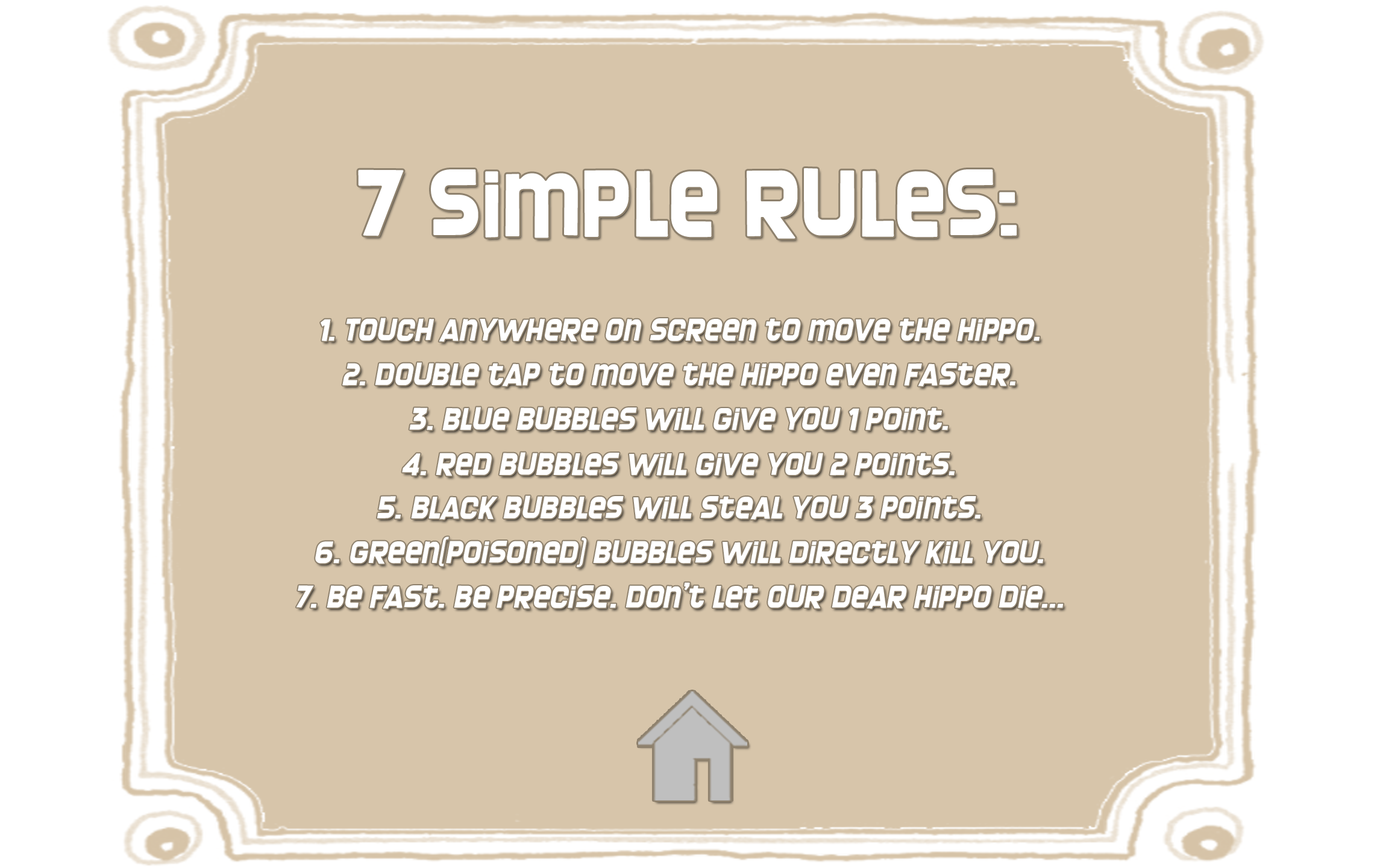
<style>
.page{position:relative;width:1374px;height:868px;background:#d7c5aa}
.page>*{position:absolute;margin:0}
.t1{font:97.6px "Screengem-Regular";color:#ffffff;scale:1.06 1}
.t2{font:32.5px "Screengem-Regular";color:#ffffff;font-style:italic;scale:1.06 1}
</style>
<div class="page">
<p class="t1" style="left:358px;top:168px;width:659px;height:71px">7 simple rules:</p>
<p class="t2" style="left:321px;top:318px;width:719px;height:24px">1. Touch anywhere on screen to move the Hippo.</p>
<p class="t2" style="left:342px;top:362px;width:674px;height:24px">2. double tap to move the hippo even faster.</p>
<p class="t2" style="left:409px;top:407px;width:540px;height:23px">3. Blue bubbles will give you 1 point.</p>
<p class="t2" style="left:402px;top:452px;width:553px;height:24px">4. red bubbles will give you 2 points.</p>
<p class="t2" style="left:377px;top:495px;width:604px;height:24px">5. black bubbles will steal you 3 points.</p>
<p class="t2" style="left:315px;top:536px;width:729px;height:31px">6. green(poisoned) bubbles will directly kill you.</p>
<p class="t2" style="left:296px;top:582px;width:768px;height:27px">7. be fast. be precise. don’t let our dear hippo die...</p>
</div>
